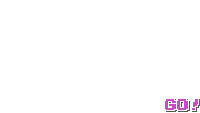
<style>
.page{position:relative;width:200px;height:113px;background:#ffffff}
.page>*{position:absolute;margin:0}
.t1{font:12px "MegaMan-2";color:#ca4bc9}
</style>
<div class="page">
<p class="t1" style="left:165px;top:99px;width:33px;height:11px">GO!</p>
</div>
